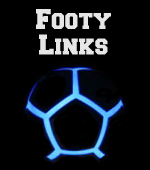
<style>
.page{position:relative;width:150px;height:170px;background:#000000}
.page>*{position:absolute;margin:0}
.t1{font:24px/18px "CollegiateBlackFLF";color:#e6e6e6}
</style>
<div class="page">
<p class="t1" style="left:36px;top:9px;width:75px;height:46px;text-align:center">Footy<br>Links</p>
</div>
